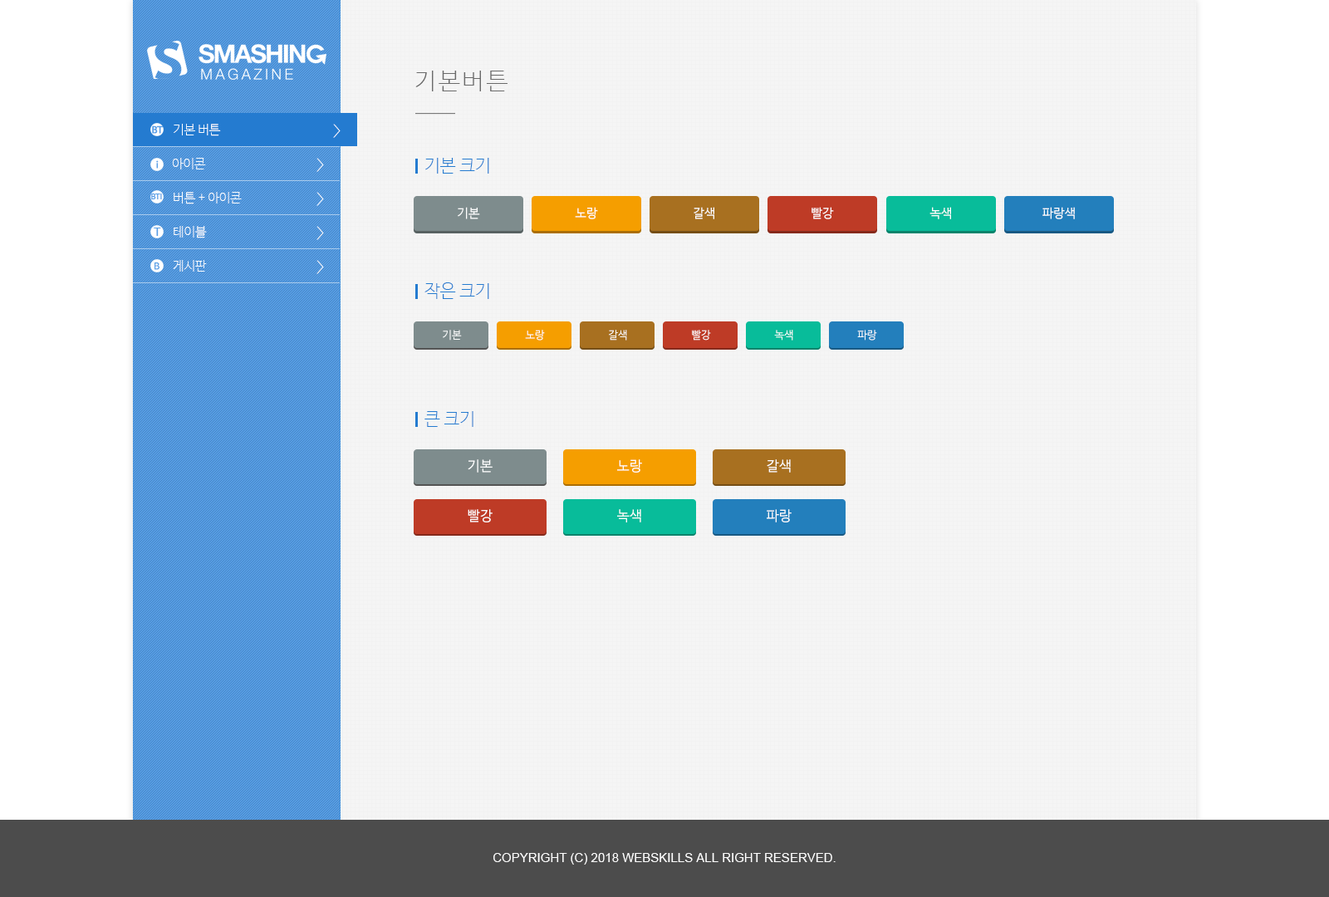
<style>
.page{position:relative;width:1329px;height:897px;background:#f3f3f3}
.page>*{position:absolute;margin:0}
.t1{font:24.1px "NanumBarunGothicUltraLight";letter-spacing:0.1em;color:#6a6a6a}
.t2{font:9.1px "NanumBarunGothicBold";color:#569ee6}
.t3{font:12.5px "NanumBarunGothicUltraLight";color:#ffffff;text-transform:uppercase}
.t4{font:14.1px "NanumBarunGothicUltraLight";color:#ffffff;text-transform:uppercase;scale:1.6 1}
.t5{font:17.4px "NanumBarunGothicUltraLight";color:#247bd0;text-transform:uppercase}
.t6{font:7.5px "NanumBarunGothicBold";color:#569ee6}
.t7{font:12.5px "NanumBarunGothic";color:#ffffff;text-transform:uppercase}
.t8{font:10.8px "NanumBarunGothicBold";color:#569ee6}
.t9{font:10.8px "NanumBarunGothic";color:#ffffff;text-transform:uppercase}
.t10{font:14.1px "NanumBarunGothic";color:#ffffff;text-transform:uppercase}
.t11{font:12.5px "ArialMT";color:#ffffff;text-transform:uppercase}
</style>
<div class="page">
<p class="t1" style="left:415px;top:71px;width:93px;height:20px">기본버튼</p>
<p class="t2" style="left:152px;top:125px;width:11px;height:9px">BT</p>
<p class="t3" style="left:174px;top:124px;width:47px;height:12px">기본 버튼</p>
<p class="t4" style="left:333px;top:124px;width:8px;height:14px">&gt;</p>
<p class="t2" style="left:156px;top:160px;width:3px;height:9px">i</p>
<p class="t3" style="left:172px;top:158px;width:34px;height:11px">아이콘</p>
<p class="t4" style="left:316px;top:158px;width:8px;height:14px">&gt;</p>
<p class="t5" style="left:425px;top:158px;width:64px;height:16px">기본 크기</p>
<p class="t6" style="left:151px;top:194px;width:11px;height:5px">BTI</p>
<p class="t3" style="left:174px;top:192px;width:68px;height:12px">버튼 + 아이콘</p>
<p class="t4" style="left:316px;top:192px;width:8px;height:14px">&gt;</p>
<p class="t7" style="left:458px;top:207px;width:22px;height:12px">기본</p>
<p class="t7" style="left:575px;top:207px;width:23px;height:12px">노랑</p>
<p class="t7" style="left:694px;top:207px;width:20px;height:12px">갈색</p>
<p class="t7" style="left:812px;top:207px;width:22px;height:12px">빨강</p>
<p class="t7" style="left:930px;top:207px;width:21px;height:12px">녹색</p>
<p class="t7" style="left:1043px;top:207px;width:32px;height:12px">파랑색</p>
<p class="t8" style="left:154px;top:228px;width:7px;height:8px">T</p>
<p class="t3" style="left:174px;top:226px;width:33px;height:12px">테이블</p>
<p class="t4" style="left:316px;top:226px;width:8px;height:14px">&gt;</p>
<p class="t2" style="left:155px;top:263px;width:4px;height:7px">B</p>
<p class="t3" style="left:173px;top:260px;width:34px;height:12px">게시판</p>
<p class="t4" style="left:316px;top:260px;width:8px;height:14px">&gt;</p>
<p class="t5" style="left:424px;top:282px;width:65px;height:17px">작은 크기</p>
<p class="t9" style="left:443px;top:330px;width:19px;height:11px">기본</p>
<p class="t9" style="left:525px;top:330px;width:20px;height:11px">노랑</p>
<p class="t9" style="left:609px;top:330px;width:18px;height:11px">갈색</p>
<p class="t9" style="left:692px;top:330px;width:19px;height:11px">빨강</p>
<p class="t9" style="left:774px;top:330px;width:19px;height:11px">녹색</p>
<p class="t9" style="left:857px;top:330px;width:20px;height:11px">파랑</p>
<p class="t5" style="left:424px;top:411px;width:49px;height:16px">큰 크기</p>
<p class="t10" style="left:468px;top:459px;width:25px;height:14px">기본</p>
<p class="t10" style="left:617px;top:459px;width:25px;height:14px">노랑</p>
<p class="t10" style="left:767px;top:459px;width:24px;height:14px">갈색</p>
<p class="t10" style="left:468px;top:509px;width:25px;height:14px">빨강</p>
<p class="t10" style="left:617px;top:509px;width:24px;height:14px">녹색</p>
<p class="t10" style="left:767px;top:509px;width:25px;height:14px">파랑</p>
<p class="t11" style="left:493px;top:853px;width:343px;height:12px">Copyright (c) 2018 webskills all right reserved.</p>
</div>
